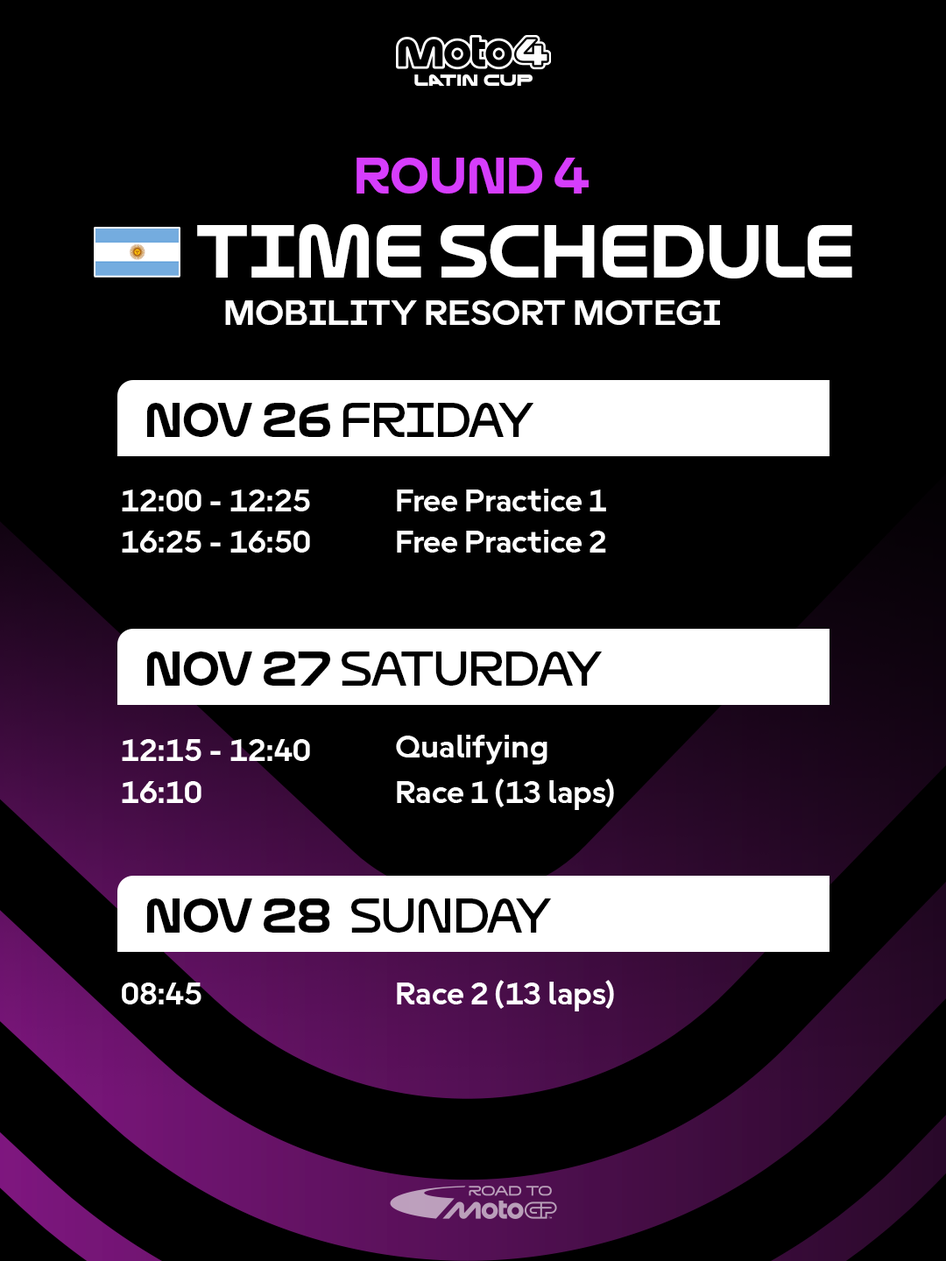
<style>
.page{position:relative;width:946px;height:1261px;background:#000000}
.page>*{position:absolute;margin:0}
.t1{font:43.8px "MGPDisplay-Medium";color:#d63dfc}
.t2{font:65.7px "MGPDisplay-Medium";color:#ffffff}
.t3{font:38.9px "MGPText-Bold";color:#ffffff;text-transform:uppercase}
.t4{font:41.3px "MGPDisplay-Medium";color:#000000}
.t5{font:41.3px "MGPDisplay-Regular";color:#000000}
.t6{font:34.1px "MGPText-Bold";color:#ffffff}
</style>
<div class="page">
<p class="t1" style="left:356px;top:158px;width:232px;height:36px">round 4</p>
<p class="t2" style="left:197px;top:224px;width:655px;height:54px">TIME SCHEDULE</p>
<p class="t3" style="left:225px;top:300px;width:495px;height:25px">mobility resort motegi</p>
<p class="t4" style="left:147px;top:403px;width:387px;height:34px">nov 26 <span class="t5">friday</span></p>
<p class="t6" style="left:122px;top:489px;width:188px;height:22px">12:00 - 12:25</p>
<p class="t6" style="left:397px;top:489px;width:209px;height:22px">Free Practice 1</p>
<p class="t6" style="left:122px;top:531px;width:188px;height:22px">16:25 - 16:50</p>
<p class="t6" style="left:397px;top:530px;width:209px;height:23px">Free Practice 2</p>
<p class="t5" style="left:147px;top:651px;width:455px;height:35px"><span class="t4">nov 27 </span>saturday</p>
<p class="t6" style="left:396px;top:735px;width:151px;height:29px">Qualifying</p>
<p class="t6" style="left:122px;top:739px;width:188px;height:22px">12:15 - 12:40</p>
<p class="t6" style="left:122px;top:781px;width:79px;height:22px">16:10</p>
<p class="t6" style="left:397px;top:778px;width:217px;height:32px">Race 1 (13 laps)</p>
<p class="t4" style="left:147px;top:898px;width:405px;height:35px">nov 28  <span class="t5">sunday</span></p>
<p class="t6" style="left:122px;top:982px;width:79px;height:22px">08:45</p>
<p class="t6" style="left:397px;top:980px;width:217px;height:31px">Race 2 (13 laps)</p>
</div>
